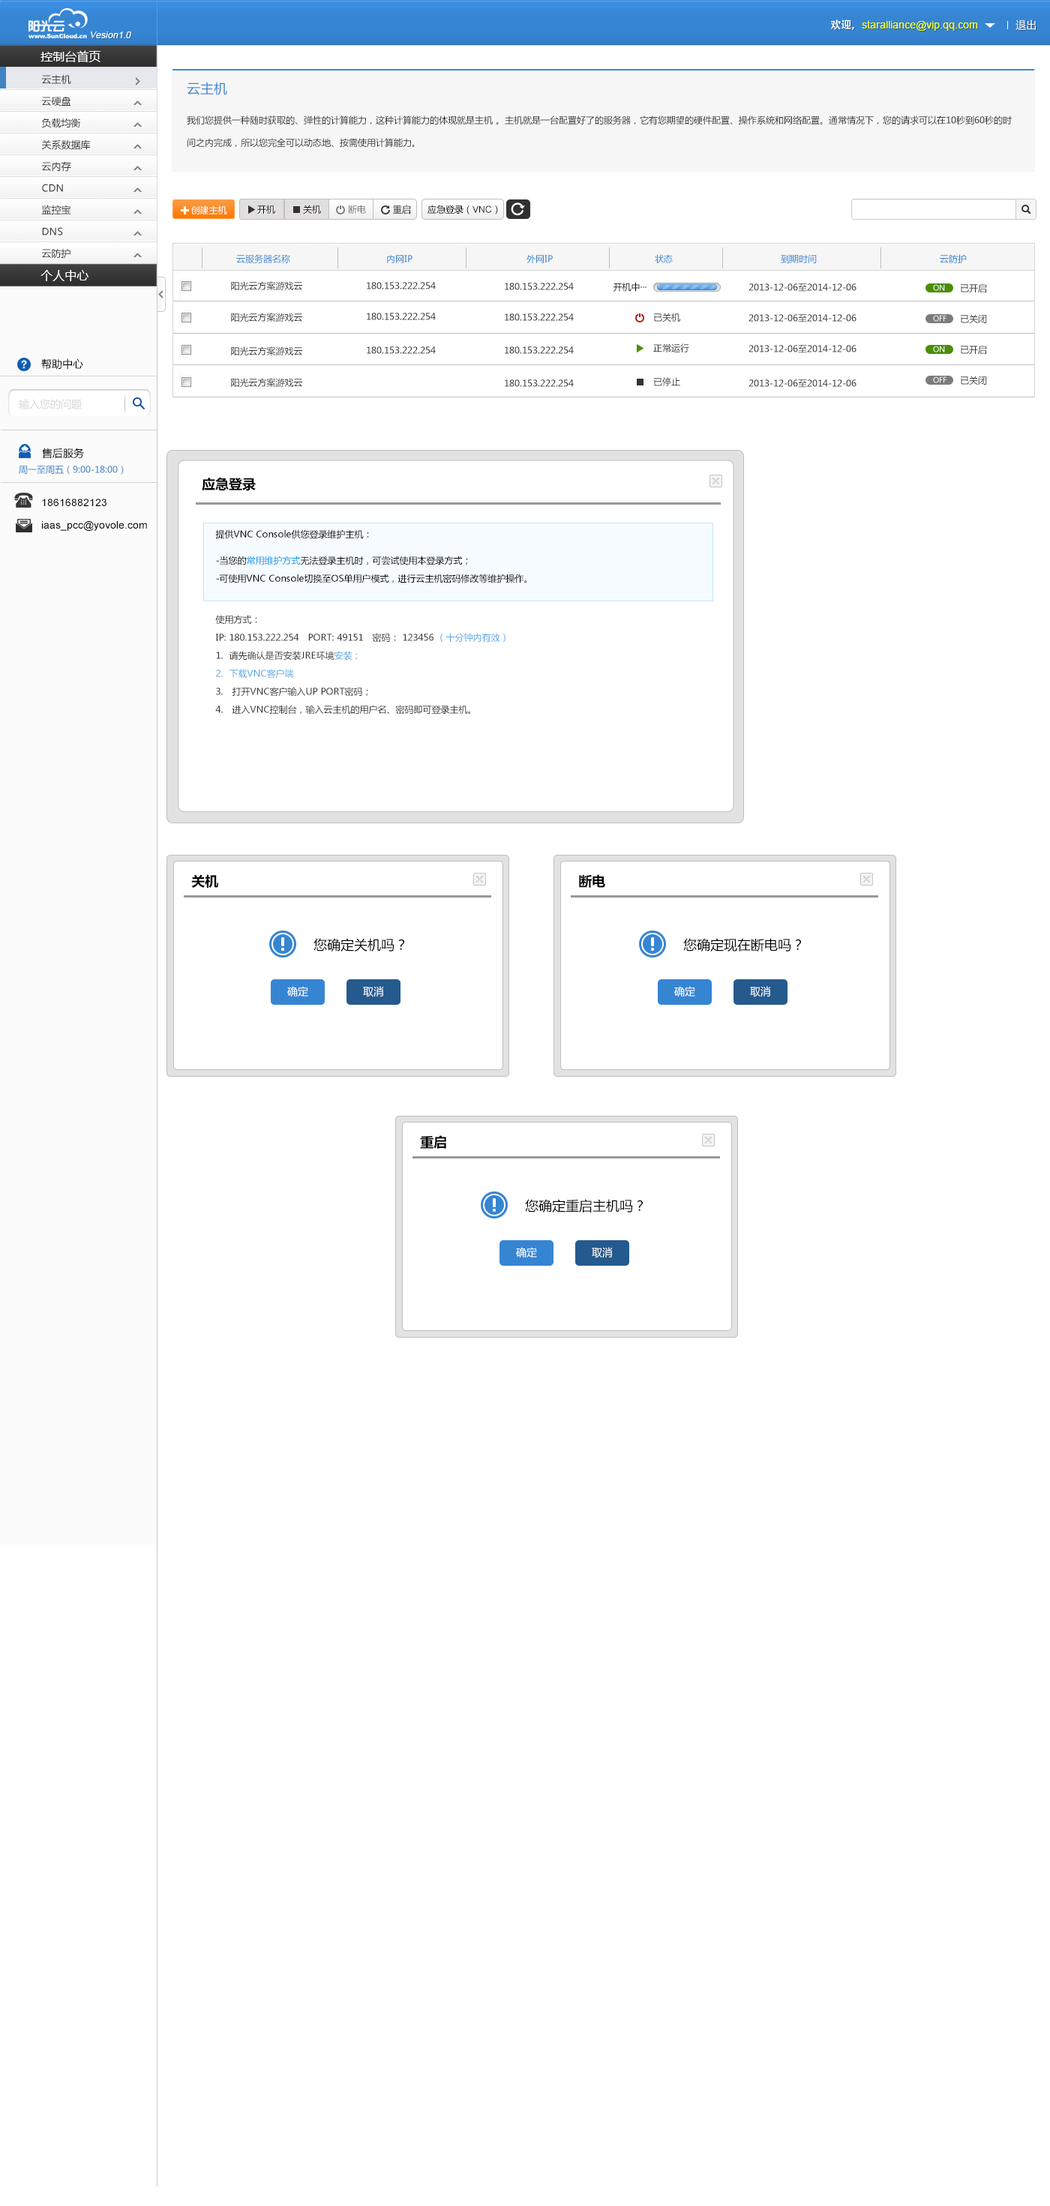
<style>
.page{position:relative;width:1050px;height:2206px;background:#ffffff}
.page>*{position:absolute;margin:0}
.t1{font:10.5px "ArialMT";color:#fcff0e}
.t2{font:10.5px "AdobeHeitiStd-Regular";color:#ffffff}
.t3{font:10.5px "MicrosoftYaHei";color:#ffffff}
.t4{font:9px "ArialMT";color:#ffffff;font-style:italic}
.t5{font:12px "MicrosoftYaHei";color:#ffffff}
.t6{font:9.8px "MicrosoftYaHei";color:#333333}
.t7{font:13.5px "MicrosoftYaHei";color:#3685d3}
.t8{font:9px/22.5px "MicrosoftYaHei";color:#333333}
.t9{font:9px "MicrosoftYaHei";color:#fefefe}
.t10{font:9px "MicrosoftYaHei";color:#000000}
.t11{font:9px "MicrosoftYaHei";color:#696868}
.t12{font:9px "ArialMT";color:#000000}
.t13{font:9px "MicrosoftYaHei";color:#3685d3}
.t14{font:9px "MicrosoftYaHei";color:#333333}
.t15{font:10.5px "MicrosoftYaHei";color:#000000}
.t16{font:7.5px "MicrosoftYaHei";color:#ffffff}
.t17{font:10.5px "MicrosoftYaHei";color:#d7d7d7}
.t18{font:9px "MicrosoftYaHei";color:#4182c3}
.t19{font:13.5px "MicrosoftYaHei-Bold";color:#000000}
.t20{font:10.5px/7.5px "ArialMT";color:#000000}
.t21{font:9px/18px "MicrosoftYaHei";color:#000000}
.t22{font:9px/8.2px "MicrosoftYaHei";color:#000000}
.t23{font:9px/18px "MicrosoftYaHei";color:#0b98e7}
.t24{font:9px/18px "MicrosoftYaHei";color:#333333}
.t25{font:9px/18px "MicrosoftYaHei";color:#57a5e2}
.t26{font:13.5px "MicrosoftYaHei";color:#000000}
</style>
<div class="page">
<p class="t1" style="left:831px;top:20px;width:147px;height:11px"><span class="t2">欢迎，</span>staralliance@vip.qq.com</p>
<p class="t3" style="left:1016px;top:20px;width:20px;height:10px">退出</p>
<p class="t4" style="left:91px;top:32px;width:40px;height:6px">Vesion1.0</p>
<p class="t5" style="left:40px;top:50px;width:60px;height:13px">控制台首页</p>
<p class="t6" style="left:41px;top:74px;width:30px;height:11px">云主机</p>
<p class="t7" style="left:187px;top:82px;width:40px;height:13px">云主机</p>
<p class="t6" style="left:41px;top:96px;width:30px;height:10px">云硬盘</p>
<p class="t6" style="left:41px;top:118px;width:39px;height:10px">负载均衡</p>
<p class="t8" style="left:187px;top:116px;width:825px;height:32px">我们您提供一种随时获取的、弹性的计算能力，这种计算能力的体现就是主机 。主机就是一台配置好了的服务器，它有您期望的硬件配置、操作系统和网络配置。通常情况下，您的请求可以在10秒到60秒的时间之内完成，所以您完全可以动态地、按需使用计算能力。</p>
<p class="t6" style="left:41px;top:140px;width:50px;height:10px">关系数据库</p>
<p class="t6" style="left:41px;top:161px;width:30px;height:11px">云内存</p>
<p class="t6" style="left:42px;top:184px;width:21px;height:8px">CDN</p>
<p class="t6" style="left:41px;top:205px;width:30px;height:9px">监控宝</p>
<p class="t9" style="left:190px;top:206px;width:37px;height:9px">创建主机</p>
<p class="t10" style="left:257px;top:205px;width:18px;height:9px">开机</p>
<p class="t10" style="left:303px;top:205px;width:18px;height:9px">关机</p>
<p class="t11" style="left:348px;top:205px;width:18px;height:9px">断电</p>
<p class="t10" style="left:393px;top:205px;width:18px;height:9px">重启</p>
<p class="t10" style="left:428px;top:205px;width:70px;height:9px">应急登录（<span class="t12">VNC</span>）</p>
<p class="t6" style="left:42px;top:227px;width:21px;height:9px">DNS</p>
<p class="t6" style="left:41px;top:248px;width:29px;height:11px">云防护</p>
<p class="t13" style="left:236px;top:254px;width:731px;height:10px">云服务器名称                                内网IP                                      外网IP                                  状态                                    到期时间                                         云防护</p>
<p class="t5" style="left:40px;top:270px;width:48px;height:11px">个人中心</p>
<p class="t14" style="left:231px;top:281px;width:72px;height:10px">阳光云方案游戏云</p>
<p class="t14" style="left:367px;top:282px;width:69px;height:8px">180.153.222.254</p>
<p class="t14" style="left:505px;top:283px;width:69px;height:7px">180.153.222.254</p>
<p class="t10" style="left:613px;top:283px;width:33px;height:9px">开机中···<span class="t15">开机中</span></p>
<p class="t14" style="left:748px;top:284px;width:108px;height:8px">2013-12-06至2014-12-06</p>
<p class="t16" style="left:933px;top:284px;width:12px;height:7px">ON</p>
<p class="t14" style="left:961px;top:284px;width:26px;height:9px">已开启</p>
<p class="t14" style="left:231px;top:313px;width:72px;height:9px">阳光云方案游戏云</p>
<p class="t14" style="left:367px;top:313px;width:69px;height:7px">180.153.222.254</p>
<p class="t14" style="left:505px;top:314px;width:69px;height:7px">180.153.222.254</p>
<p class="t14" style="left:654px;top:313px;width:26px;height:9px">已关机</p>
<p class="t14" style="left:748px;top:314px;width:108px;height:8px">2013-12-06至2014-12-06</p>
<p class="t16" style="left:933px;top:315px;width:13px;height:7px">OFF</p>
<p class="t14" style="left:961px;top:314px;width:26px;height:10px">已关闭</p>
<p class="t14" style="left:231px;top:346px;width:72px;height:10px">阳光云方案游戏云</p>
<p class="t14" style="left:367px;top:346px;width:69px;height:8px">180.153.222.254</p>
<p class="t14" style="left:505px;top:346px;width:69px;height:8px">180.153.222.254</p>
<p class="t14" style="left:653px;top:344px;width:36px;height:8px">正常运行</p>
<p class="t14" style="left:748px;top:345px;width:108px;height:8px">2013-12-06至2014-12-06</p>
<p class="t16" style="left:933px;top:346px;width:12px;height:6px">ON</p>
<p class="t14" style="left:961px;top:345px;width:26px;height:10px">已开启</p>
<p class="t15" style="left:41px;top:358px;width:42px;height:12px">帮助中心</p>
<p class="t14" style="left:654px;top:377px;width:26px;height:9px">已停止</p>
<p class="t16" style="left:933px;top:376px;width:13px;height:7px">OFF</p>
<p class="t14" style="left:961px;top:376px;width:26px;height:10px">已关闭</p>
<p class="t14" style="left:231px;top:378px;width:72px;height:10px">阳光云方案游戏云</p>
<p class="t14" style="left:505px;top:380px;width:69px;height:7px">180.153.222.254</p>
<p class="t14" style="left:748px;top:380px;width:108px;height:8px">2013-12-06至2014-12-06</p>
<p class="t17" style="left:19px;top:399px;width:63px;height:11px">输入您的问题</p>
<p class="t15" style="left:42px;top:448px;width:42px;height:11px">售后服务</p>
<p class="t18" style="left:19px;top:466px;width:105px;height:9px">周一至周五（9:00-18:00）</p>
<p class="t19" style="left:202px;top:478px;width:54px;height:13px">应急登录</p>
<p class="t20" style="left:42px;top:499px;width:105px;height:32px">18616882123   <br><br><br>iaas_pcc@yovole.com</p>
<p class="t21" style="left:215px;top:530px;width:311px;height:54px"><span class="t22">提供VNC Console供您登录维护主机：<br><br></span>-当您的<span class="t23">常用维护方式</span>无法登录主机时，可尝试使用本登录方式；<br>-可使用VNC Console切换至OS单用户模式，进行云主机密码修改等维护操作。</p>
<p class="t24" style="left:215px;top:615px;width:291px;height:100px">使用方式：<br>IP: 180.153.222.254   PORT: 49151   密码： 123456 <span class="t25">（十分钟内有效）<br></span>1.  请先确认是否安装JRE环境<span class="t25">安装；<br>2.  下载VNC客户端<br></span>3.   打开VNC客户输入UP PORT密码；<br>4.   进入VNC控制台，输入云主机的用户名、密码即可登录主机。</p>
<p class="t19" style="left:191px;top:874px;width:27px;height:14px">关机</p>
<p class="t19" style="left:579px;top:874px;width:26px;height:14px">断电</p>
<p class="t26" style="left:314px;top:938px;width:90px;height:14px">您确定关机吗？</p>
<p class="t26" style="left:683px;top:938px;width:118px;height:14px">您确定现在断电吗？</p>
<p class="t3" style="left:287px;top:986px;width:21px;height:12px">确定</p>
<p class="t3" style="left:363px;top:986px;width:21px;height:12px">取消</p>
<p class="t3" style="left:674px;top:986px;width:21px;height:12px">确定</p>
<p class="t3" style="left:750px;top:986px;width:21px;height:12px">取消</p>
<p class="t19" style="left:420px;top:1136px;width:26px;height:13px">重启</p>
<p class="t26" style="left:525px;top:1199px;width:118px;height:14px">您确定重启主机吗？</p>
<p class="t3" style="left:516px;top:1247px;width:21px;height:11px">确定</p>
<p class="t3" style="left:592px;top:1247px;width:21px;height:11px">取消</p>
</div>
